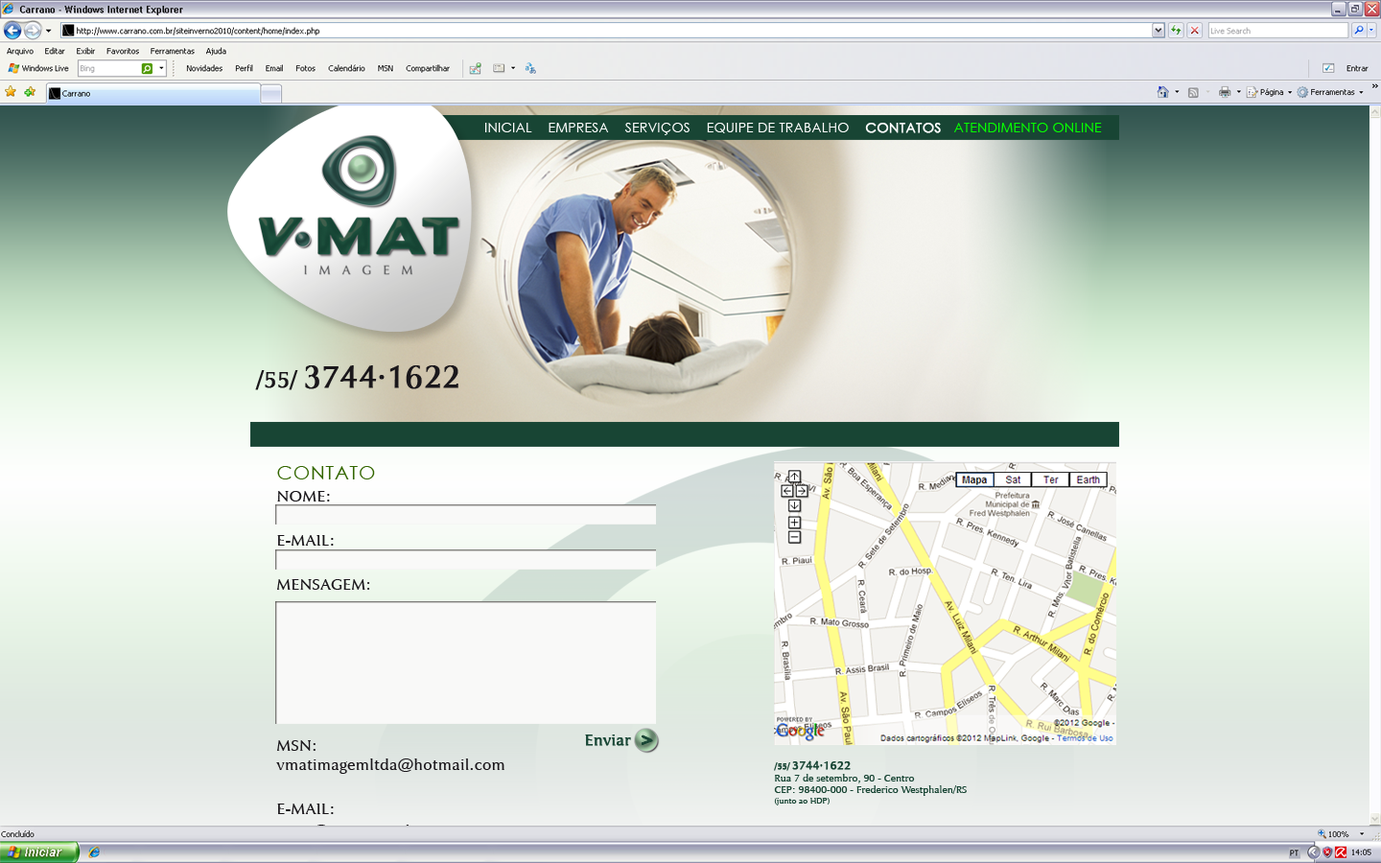
<style>
.page{position:relative;width:1381px;height:863px}
.page>*{position:absolute;margin:0}
.t1{font:13px "CenturyGothic";letter-spacing:0.035em;color:#ffffff}
.t2{font:13px "CenturyGothic";letter-spacing:0.035em;color:#ffffff;font-weight:bold}
.t3{font:13px "CenturyGothic";letter-spacing:0.035em;color:#06fe00}
.t4{font:31.6px "JaguarJCBook";color:#1a171b;font-weight:bold}
.t5{font:22.6px "JaguarJCBook";color:#1a171b;font-weight:bold}
.t6{font:19.4px "CenturyGothic";letter-spacing:0.035em;color:#336600}
.t7{font:16px/22px "JaguarJCBook";letter-spacing:0.02em;color:#1a171b}
.t8{font:16px "JaguarJCBook";color:#184534;font-weight:bold}
.t9{font:16px "JaguarJCBook";letter-spacing:0.02em;color:#1a171b}
.t10{font:16px/22px "JaguarJCBook";letter-spacing:0.02em}
.t11{font:10.1px "JaguarJCBook";color:#184534}
.t12{font:8.4px "JaguarJCBook";color:#184534;font-weight:bold}
.t13{font:11.8px "JaguarJCBook";color:#184534;font-weight:bold}
.t14{font:8.4px "JaguarJCBook";color:#184534}
</style>
<div class="page">
<p class="t1" style="left:485px;top:123px;width:617px;height:12px">INICIAL    EMPRESA    SERVIÇOS    EQUIPE DE TRABALHO    <span class="t2">CONTATOS   </span><span class="t3">ATENDIMENTO ONLINE</span></p>
<p class="t4" style="left:255px;top:365px;width:204px;height:25px"><span class="t5">/55/ </span>3744·1622</p>
<p class="t6" style="left:277px;top:466px;width:98px;height:14px">CONTATO</p>
<p class="t7" style="left:277px;top:491px;width:93px;height:99px;text-align:justify">NOME:<br><br>E-MAIL:<br><br>MENSAGEM:</p>
<p class="t8" style="left:585px;top:735px;width:46px;height:11px">Enviar</p>
<p class="t8" style="left:642px;top:736px;width:11px;height:9px">&gt;</p>
<p class="t9" style="left:277px;top:741px;width:39px;height:10px">MSN:</p>
<p class="t10" style="left:276px;top:759px;width:229px;height:101px;text-align:justify">vmatimagemltda@hotmail.com<br><br>E-MAIL:<br>vmat@vmat.com.br<br>atendimento@vmat.com.br</p>
<p class="t11" style="left:774px;top:761px;width:193px;height:45px"><span class="t12">/55/ </span><span class="t13">3744·1622<br></span>Rua 7 de setembro, 90 - Centro<br>CEP: 98400-000 - Frederico Westphalen/RS<br><span class="t14">(junto ao HDP)</span></p>
</div>
